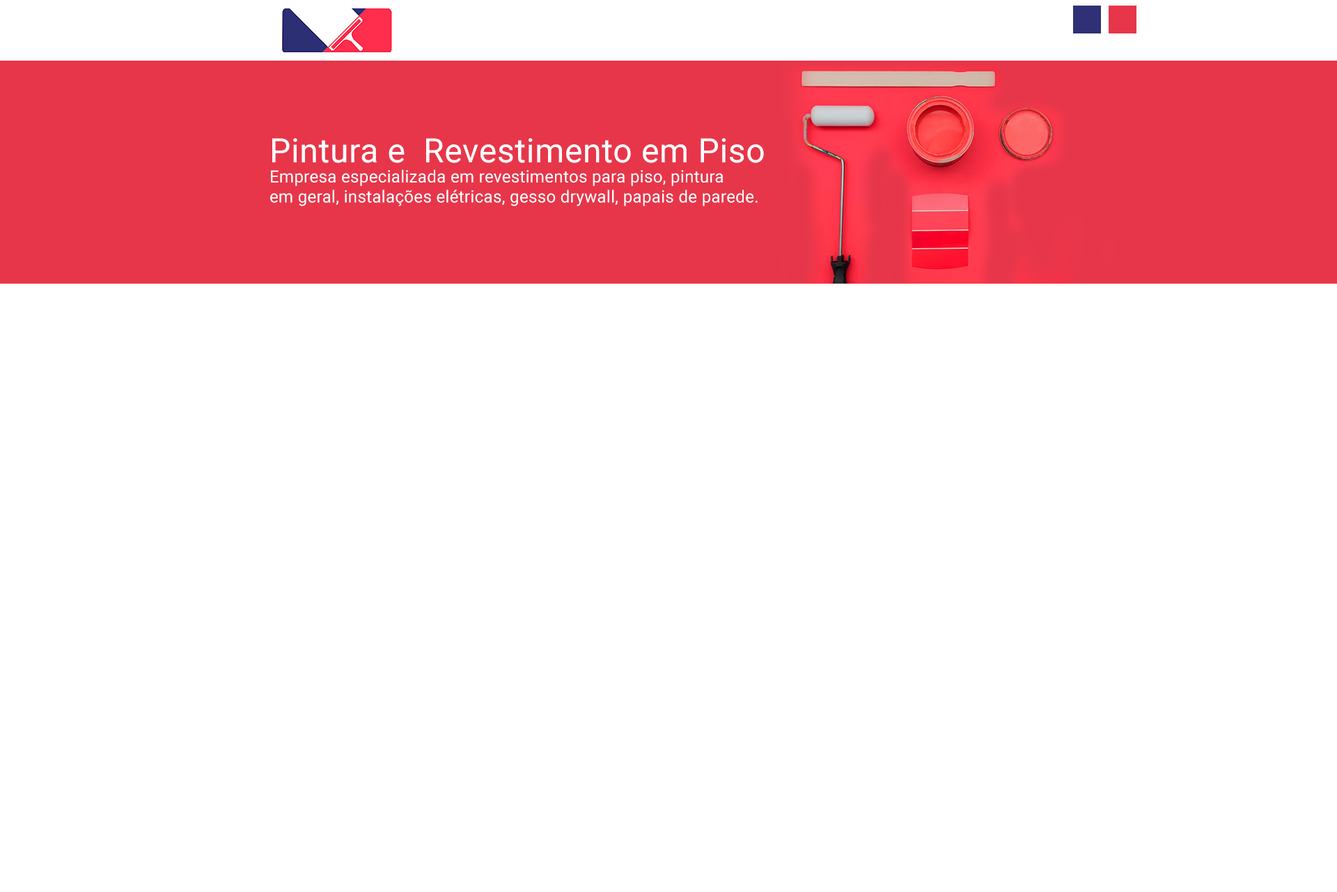
<style>
.page{position:relative;width:1337px;height:892px;background:#ffffff}
.page>*{position:absolute;margin:0}
.t1{font:16.7px "Roboto-Regular";letter-spacing:0.015em;color:#ffffff}
.t2{font:33.4px "Roboto-Regular";letter-spacing:0.015em;color:#ffffff}
</style>
<div class="page">
<p class="t1" style="left:270px;top:138px;width:494px;height:68px"><span class="t2">Pintura e  Revestimento em Piso<br></span>Empresa especializada em revestimentos para piso, pintura <br>em geral, instalações elétricas, gesso drywall, papais de parede.</p>
</div>
